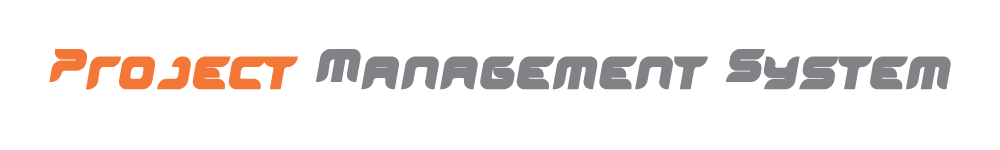
<style>
.page{position:relative;width:1000px;height:150px;background:#ffffff}
.page>*{position:absolute;margin:0}
.t1{font:63.9px "Miniskup";color:#818286;font-weight:bold}
.t2{font:63.9px "Miniskup";color:#f37737;font-weight:bold}
</style>
<div class="page">
<p class="t1" style="left:49px;top:49px;width:902px;height:41px"><span class="t2">Project </span>Management System</p>
</div>
